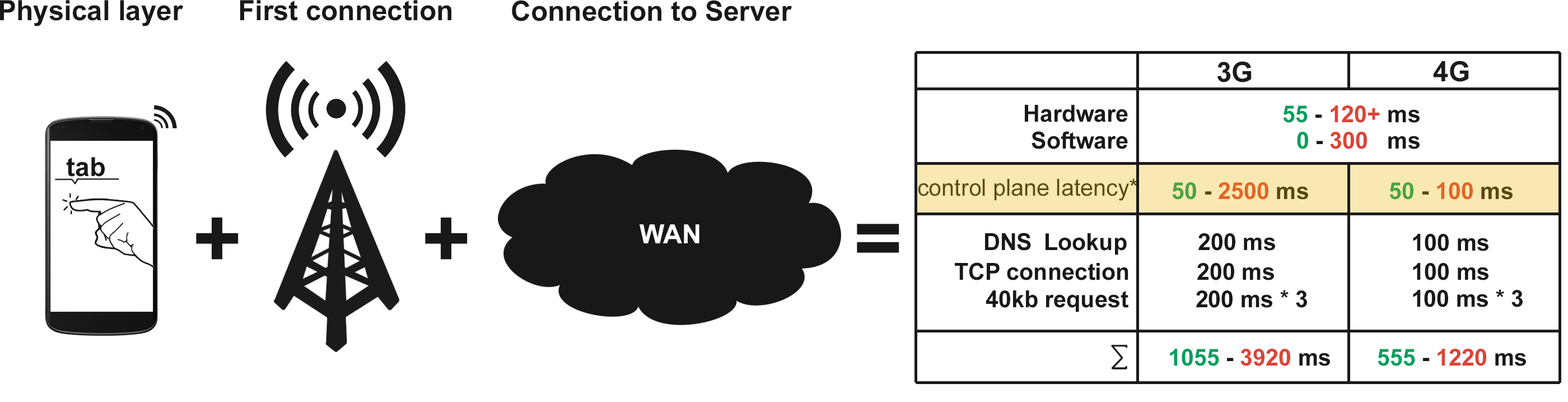
<style>
.page{position:relative;width:1568px;height:402px;background:#ffffff}
.page>*{position:absolute;margin:0}
.t1{font:6.7px/32.7px "Arial-BoldMT";color:#181818}
.t2{font:6.7px/32.7px "Arial-BoldMT";color:#1b1b1b}
.t3{font:23.3px "Arial-BoldMT";color:#181818}
.t4{font:23.3px "Arial-BoldMT";color:#dc4437}
.t5{font:23.3px "Arial-BoldMT";color:#009f5d}
.t6{font:26.3px "Arial-BoldMT";color:#181818}
.t7{font:23.3px "ArialMT";color:#5b4913}
.t8{font:23.3px "Arial-BoldMT"}
.t9{font:84px "Arial-BoldMT";color:#181818}
.t10{font:26.3px "Arial-BoldMT";color:#ffffff}
</style>
<div class="page">
<p class="t1" style="left:0px;top:0px;width:183px;height:26px">Physical layer</p>
<p class="t1" style="left:240px;top:0px;width:211px;height:21px">First connection</p>
<p class="t1" style="left:512px;top:0px;width:280px;height:21px">Connection to Server</p>
<p class="t2" style="left:1217px;top:61px;width:35px;height:21px">3G</p>
<p class="t2" style="left:1433px;top:60px;width:36px;height:22px">4G</p>
<p class="t3" style="left:1025px;top:105px;width:103px;height:17px">Hardware</p>
<p class="t4" style="left:1283px;top:105px;width:137px;height:18px"><span class="t5">55</span><span class="t3"> - </span>120+<span class="t3"> ms</span></p>
<p class="t3" style="left:1032px;top:131px;width:96px;height:18px">Software</p>
<p class="t4" style="left:1297px;top:132px;width:123px;height:17px"><span class="t5">0</span><span class="t3"> - </span>300<span class="t3">   ms</span></p>
<p class="t6" style="left:66px;top:157px;width:39px;height:19px">tab</p>
<p class="t7" style="left:918px;top:178px;width:220px;height:22px">control plane latency*</p>
<p class="t8" style="left:1172px;top:182px;width:136px;height:17px">50 - 2500 ms</p>
<p class="t8" style="left:1389px;top:182px;width:124px;height:17px">50 - 100 ms</p>
<p class="t9" style="left:196px;top:217px;width:43px;height:42px">+</p>
<p class="t9" style="left:425px;top:217px;width:43px;height:42px">+</p>
<p class="t10" style="left:640px;top:224px;width:59px;height:19px">WAN</p>
<p class="t9" style="left:857px;top:223px;width:42px;height:30px">=</p>
<p class="t3" style="left:985px;top:232px;width:142px;height:23px">DNS Lookup</p>
<p class="t3" style="left:1198px;top:233px;width:77px;height:17px">200 ms</p>
<p class="t3" style="left:1413px;top:234px;width:75px;height:17px">100 ms</p>
<p class="t3" style="left:955px;top:262px;width:173px;height:18px">TCP connection</p>
<p class="t3" style="left:1197px;top:263px;width:77px;height:17px">200 ms</p>
<p class="t3" style="left:1413px;top:263px;width:75px;height:17px">100 ms</p>
<p class="t3" style="left:986px;top:290px;width:142px;height:22px">40kb request</p>
<p class="t3" style="left:1196px;top:290px;width:111px;height:17px">200 ms * 3</p>
<p class="t3" style="left:1413px;top:289px;width:110px;height:18px">100 ms * 3</p>
<p class="t5" style="left:1170px;top:348px;width:160px;height:18px">1055<span class="t3"> - </span><span class="t4">3920</span><span class="t3"> ms</span></p>
<p class="t4" style="left:1378px;top:348px;width:148px;height:18px"><span class="t5">555</span><span class="t3"> - </span>1220<span class="t3"> ms</span></p>
</div>
